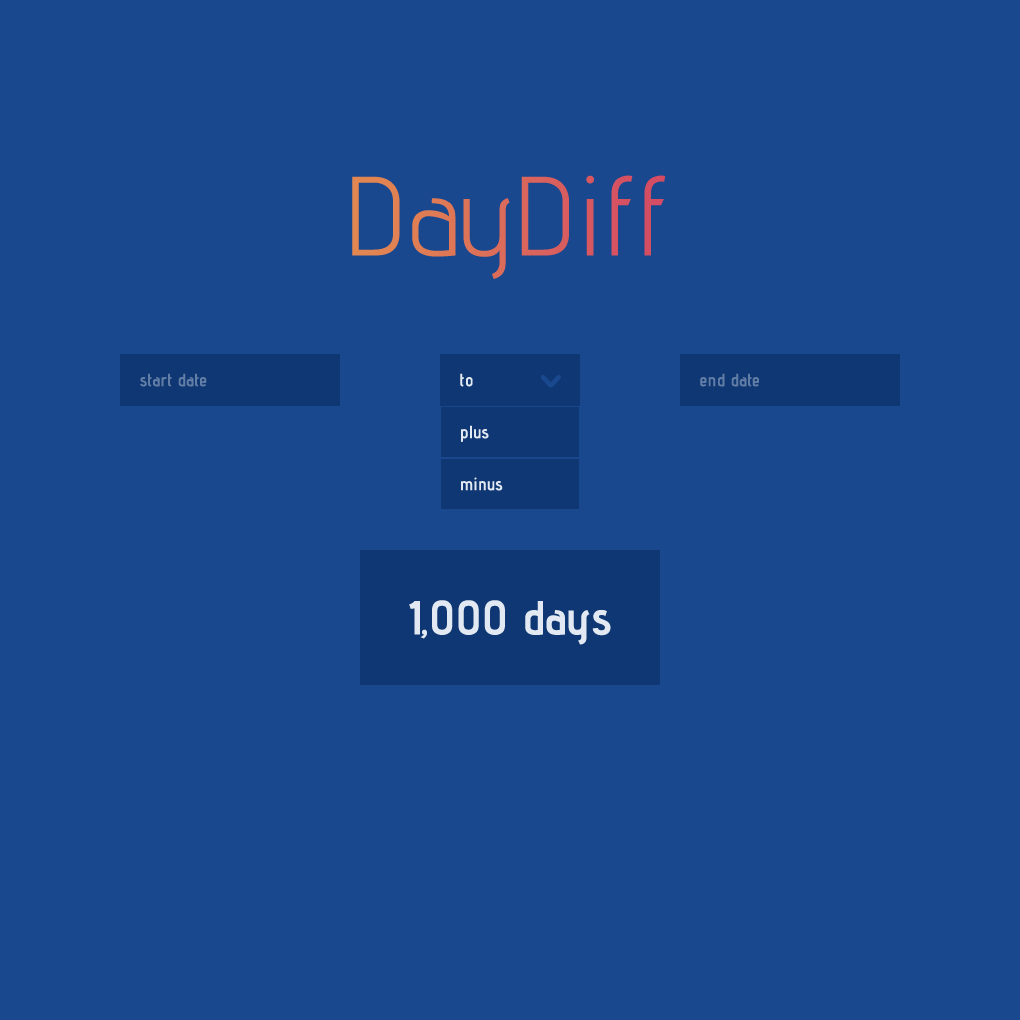
<style>
.page{position:relative;width:1020px;height:1020px;background:#19488f}
.page>*{position:absolute;margin:0}
.t1{font:112px "AdventPro-Regular"}
.t2{font:18px "AdventPro-Bold";color:#637ea6}
.t3{font:18px "AdventPro-Bold";color:#e3e9f2}
.t4{font:48px "AdventPro-Bold";color:#e3e9f2}
</style>
<div class="page">
<p class="t1" style="left:352px;top:175px;width:314px;height:104px">DayDiff</p>
<p class="t2" style="left:140px;top:373px;width:67px;height:14px">start date</p>
<p class="t3" style="left:460px;top:373px;width:13px;height:14px">to</p>
<p class="t2" style="left:700px;top:373px;width:59px;height:14px">end date</p>
<p class="t3" style="left:461px;top:425px;width:28px;height:17px">plus</p>
<p class="t3" style="left:461px;top:477px;width:42px;height:14px">minus</p>
<p class="t4" style="left:409px;top:600px;width:202px;height:45px">1,000 days</p>
</div>
